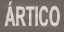
<style>
.page{position:relative;width:64px;height:32px}
.page>*{position:absolute;margin:0}
.t1{font:27.3px "Arial-BoldMT";letter-spacing:-0.03em;color:#dedbd8;font-weight:bold;scale:0.53 1}
</style>
<div class="page">
<p class="t1" style="left:4px;top:1px;width:56px;height:26px">ÁRTICO</p>
</div>
